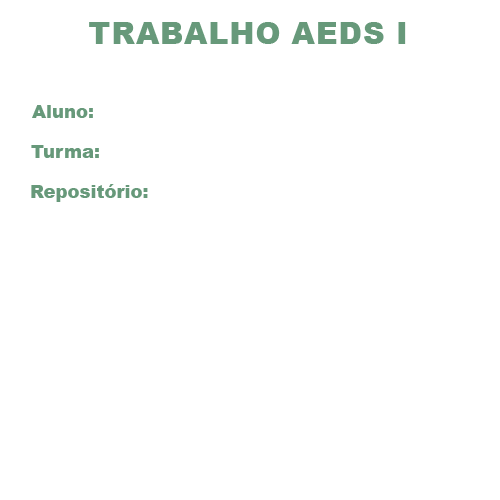
<style>
.page{position:relative;width:500px;height:500px;background:#ffffff}
.page>*{position:absolute;margin:0}
.t1{font:30px "Arial-Black";color:#67997a;text-transform:uppercase}
.t2{font:18px "Arial-Black";color:#67997a}
</style>
<div class="page">
<p class="t1" style="left:89px;top:22px;width:317px;height:22px">Trabalho aeds I</p>
<p class="t2" style="left:32px;top:105px;width:61px;height:13px">Aluno:</p>
<p class="t2" style="left:31px;top:145px;width:68px;height:13px">Turma:</p>
<p class="t2" style="left:31px;top:184px;width:117px;height:18px">Repositório:</p>
</div>
